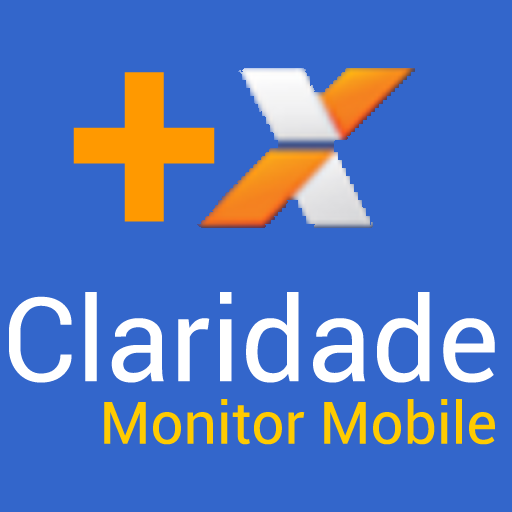
<style>
.page{position:relative;width:512px;height:512px;background:#3366cb}
.page>*{position:absolute;margin:0}
.t1{font:288px "Roboto-Bold";color:#ff9900}
.t2{font:117px "Roboto-Regular";color:#ffffff}
.t3{font:58.5px "Roboto-Regular";color:#ffcc00}
</style>
<div class="page">
<p class="t1" style="left:73px;top:72px;width:142px;height:150px">+</p>
<p class="t2" style="left:9px;top:292px;width:486px;height:91px">Claridade</p>
<p class="t3" style="left:104px;top:399px;width:391px;height:46px">Monitor Mobile</p>
</div>
